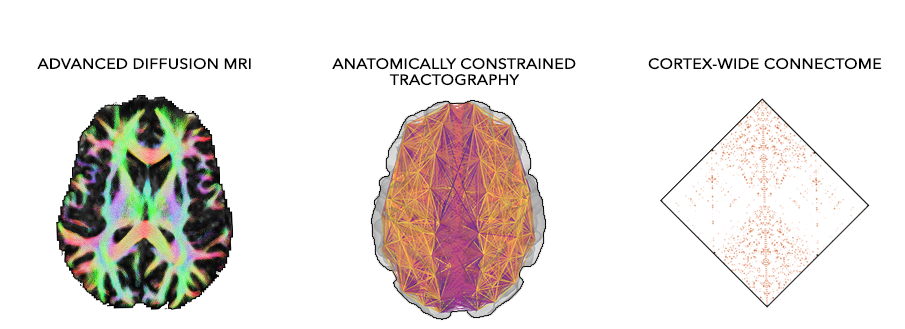
<style>
.page{position:relative;width:905px;height:329px;background:#ffffff}
.page>*{position:absolute;margin:0}
.t1{font:14.1px "AvenirNext-Regular";color:#000000;font-weight:bold;scale:1.11 1}
.t2{font:14.1px/16px "AvenirNext-Regular";color:#000000;font-weight:bold;scale:1.11 1}
</style>
<div class="page">
<p class="t1" style="left:37px;top:58px;width:214px;height:12px">ADVANCED DIFFUSION MRI</p>
<p class="t2" style="left:332px;top:58px;width:244px;height:28px;text-align:center">ANATOMICALLY CONSTRAINED<br>TRACTOGRAPHY</p>
<p class="t1" style="left:648px;top:58px;width:234px;height:12px">CORTEX-WIDE CONNECTOME</p>
</div>
